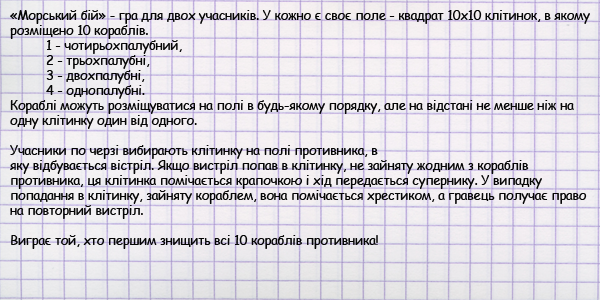
<style>
.page{position:relative;width:600px;height:300px}
.page>*{position:absolute;margin:0}
.t1{font:12.5px "ComicSansMS";color:#060606}
</style>
<div class="page">
<p class="t1" style="left:10px;top:10px;width:580px;height:239px">«Морський бій» - гра для двох учасників. У кожно є своє поле - квадрат 10x10 клітинок, в якому <br>розміщено 10 кораблів.<br> 1 - чотирьохпалубний,<br> 2 - трьохпалубні,<br> 3 - двохпалубні,<br> 4 - однопалубні.<br>Кораблі можуть розміщуватися на полі в будь-якому порядку, але на відстані не менше ніж на <br>одну клітинку один від одного. <br><br>Учасники по черзі вибирають клітинку на полі противника, в <br>яку відбувається вістріл. Якщо вистріл попав в клітинку, не зайняту жодним з кораблів <br>противника, ця клітинка помічається крапочкою і хід передається супернику. У випадку <br>попадання в клітинку, зайняту кораблем, вона помічається хрестиком, а гравець получає право<br>на повторний вистріл.<br><br>Виграє той, хто першим знищить всі 10 кораблів противника!</p>
</div>
